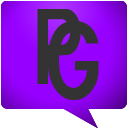
<style>
.page{position:relative;width:128px;height:128px}
.page>*{position:absolute;margin:0}
.t1{font:110px "BlueHighwayDType";color:#333333;scale:0.97 1}
</style>
<div class="page">
<p class="t1" style="left:37px;top:9px;width:44px;height:75px">P</p>
<p class="t1" style="left:47px;top:21px;width:52px;height:79px">G</p>
</div>
